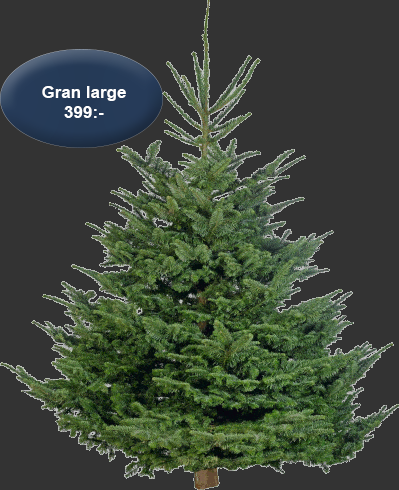
<style>
.page{position:relative;width:399px;height:490px;background:#333333}
.page>*{position:absolute;margin:0}
.t1{font:17px "Arial-BoldMT";color:#ffffff}
</style>
<div class="page">
<p class="t1" style="left:42px;top:86px;width:84px;height:32px;text-align:center">Gran large <br>399:-</p>
</div>
